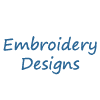
<style>
.page{position:relative;width:100px;height:100px;background:#ffffff}
.page>*{position:absolute;margin:0}
.t1{font:16px "SegoePrint";color:#2c6897}
.t2{font:14px "SegoePrint";color:#2c6897}
</style>
<div class="page">
<p class="t1" style="left:3px;top:36px;width:94px;height:39px"><span class="t2"><br></span><br>Embroidery<br>Designs</p>
</div>
